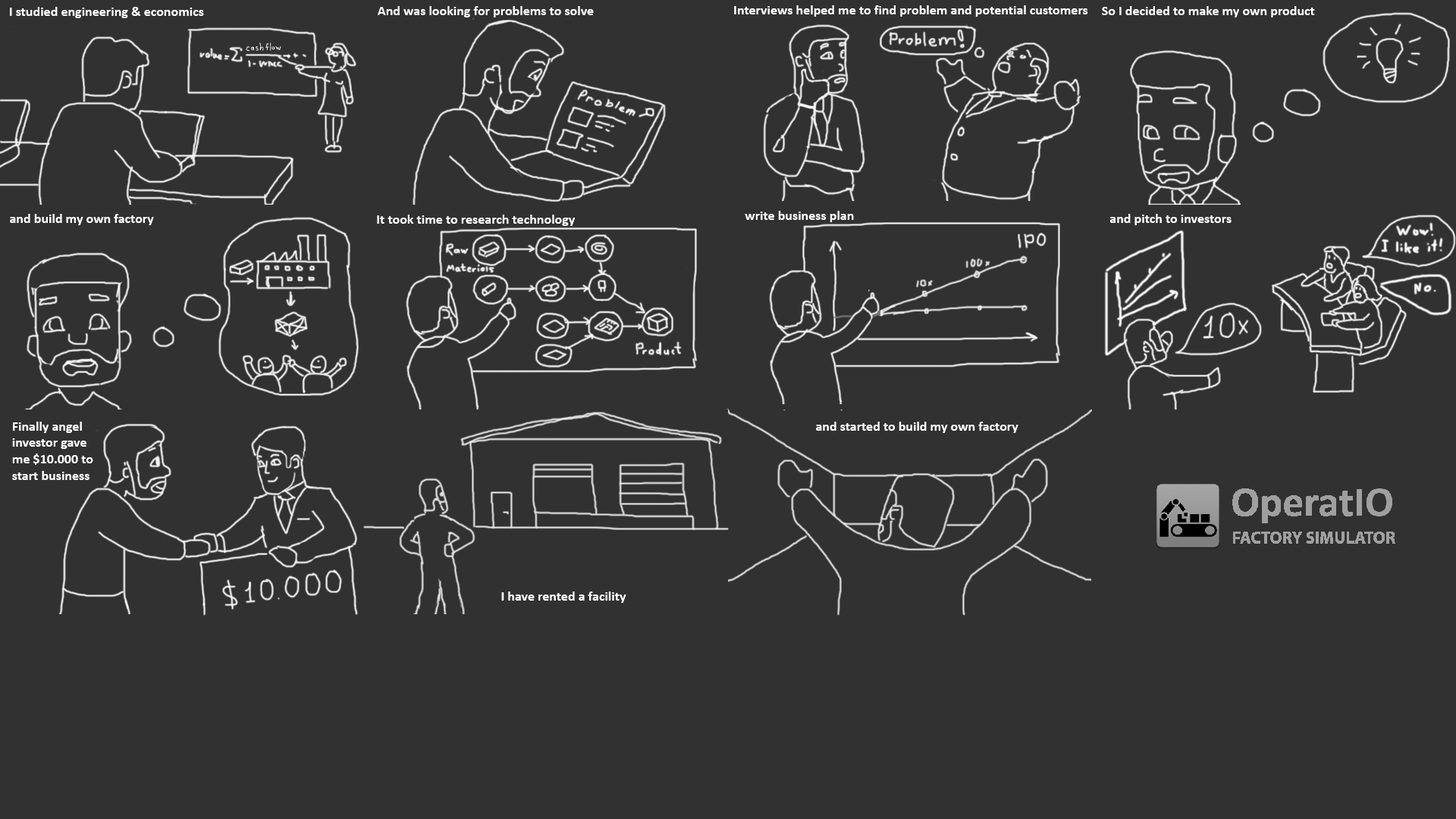
<style>
.page{position:relative;width:1456px;height:819px;background:#313131}
.page>*{position:absolute;margin:0}
.t1{font:13.6px "Calibri-Bold";color:#ffffff}
</style>
<div class="page">
<p class="t1" style="left:734px;top:5px;width:354px;height:12px">Interviews helped me to find problem and potential customers</p>
<p class="t1" style="left:10px;top:7px;width:194px;height:11px">I studied engineering &amp; economics</p>
<p class="t1" style="left:378px;top:6px;width:216px;height:11px">And was looking for problems to solve</p>
<p class="t1" style="left:1102px;top:6px;width:213px;height:11px">So I decided to make my own product</p>
<p class="t1" style="left:10px;top:214px;width:144px;height:11px">and build my own factory</p>
<p class="t1" style="left:377px;top:215px;width:198px;height:11px">It took time to research technology</p>
<p class="t1" style="left:745px;top:211px;width:109px;height:11px">write business plan</p>
<p class="t1" style="left:1109px;top:214px;width:123px;height:11px">and pitch to investors</p>
<p class="t1" style="left:12px;top:422px;width:81px;height:58px">Finally angel <br>investor gave<br>me $10.000 to<br>start business</p>
<p class="t1" style="left:816px;top:422px;width:202px;height:11px">and started to build my own factory</p>
<p class="t1" style="left:501px;top:591px;width:125px;height:12px">I have rented a facility</p>
</div>
